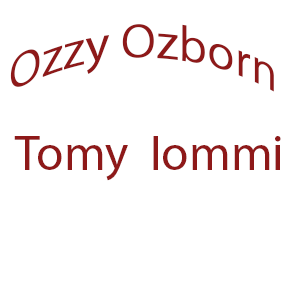
<style>
.page{position:relative;width:300px;height:300px;background:#ffffff}
.page>*{position:absolute;margin:0}
.t1{font:50px "MyriadPro-Regular";color:#8e1919}
</style>
<div class="page">
<p class="t1" style="left:10px;top:24px;width:264px;height:68px">Ozzy Ozborn</p>
<p class="t1" style="left:14px;top:136px;width:267px;height:45px">Tomy  Iommi</p>
</div>
